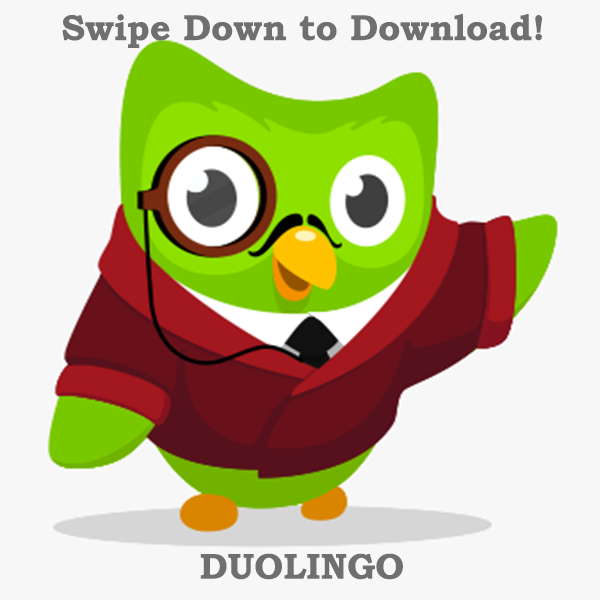
<style>
.page{position:relative;width:600px;height:600px;background:#f7f7f7}
.page>*{position:absolute;margin:0}
.t1{font:36px "BookmanOldStyle-Bold";color:#6f6f6f}
</style>
<div class="page">
<p class="t1" style="left:62px;top:14px;width:480px;height:34px">Swipe Down to Download!</p>
<p class="t1" style="left:200px;top:553px;width:203px;height:27px">DUOLINGO</p>
</div>
